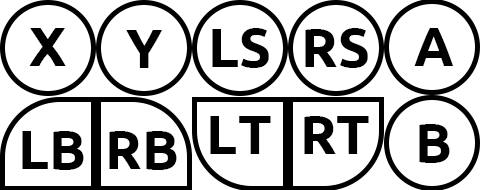
<style>
.page{position:relative;width:480px;height:190px;background:#ffffff}
.page>*{position:absolute;margin:0}
.t1{font:55.3px "Ubuntu-Bold";color:#000000}
</style>
<div class="page">
<p class="t1" style="left:29px;top:28px;width:37px;height:38px">X</p>
<p class="t1" style="left:126px;top:30px;width:36px;height:38px">Y</p>
<p class="t1" style="left:212px;top:28px;width:57px;height:40px">LS</p>
<p class="t1" style="left:305px;top:28px;width:63px;height:40px">RS</p>
<p class="t1" style="left:414px;top:28px;width:39px;height:38px">A</p>
<p class="t1" style="left:210px;top:116px;width:61px;height:38px">LT</p>
<p class="t1" style="left:304px;top:116px;width:65px;height:38px">RT</p>
<p class="t1" style="left:419px;top:124px;width:31px;height:39px">B</p>
<p class="t1" style="left:22px;top:131px;width:62px;height:39px">LB</p>
<p class="t1" style="left:109px;top:131px;width:68px;height:39px">RB</p>
</div>
